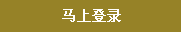
<style>
.page{position:relative;width:181px;height:32px;background:#968227}
.page>*{position:absolute;margin:0}
.t1{font:14px "SimSun";color:#ffffff;font-weight:bold}
</style>
<div class="page">
<p class="t1" style="left:62px;top:9px;width:59px;height:13px">马上登录</p>
</div>
